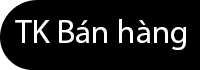
<style>
.page{position:relative;width:200px;height:70px;background:#000000}
.page>*{position:absolute;margin:0}
.t1{font:32.9px "MyriadPro-Regular";color:#fefefe}
</style>
<div class="page">
<p class="t1" style="left:15px;top:19px;width:171px;height:31px">TK Bán hàng</p>
</div>
